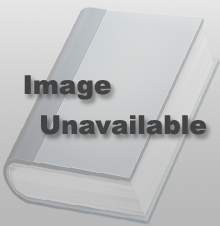
<style>
.page{position:relative;width:220px;height:226px}
.page>*{position:absolute;margin:0}
.t1{font:26px "Arial-Black";color:#434343}
</style>
<div class="page">
<p class="t1" style="left:24px;top:75px;width:87px;height:25px">Image</p>
<p class="t1" style="left:41px;top:115px;width:165px;height:20px">Unavailable</p>
</div>
